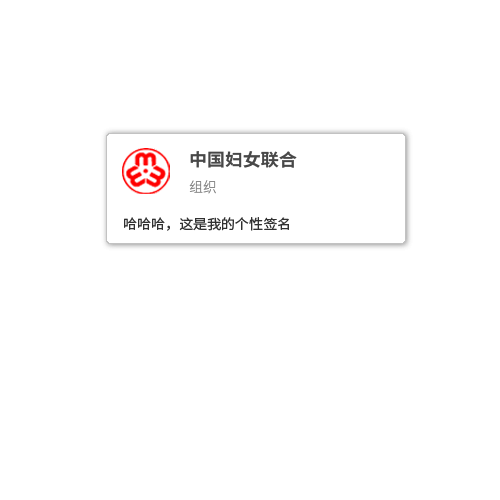
<style>
.page{position:relative;width:500px;height:500px;background:#ffffff}
.page>*{position:absolute;margin:0}
.t1{font:17.6px "NotoSansCJKsc-Bold";color:#484848}
.t2{font:13.7px "NotoSansCJKsc-Light";color:#8b8b8b}
.t3{font:13.7px "NotoSansCJKsc-Regular";color:#313131}
</style>
<div class="page">
<p class="t1" style="left:190px;top:151px;width:107px;height:17px">中国妇女联合</p>
<p class="t2" style="left:189px;top:180px;width:27px;height:14px">组织</p>
<p class="t3" style="left:124px;top:217px;width:165px;height:14px">哈哈哈，这是我的个性签名</p>
</div>
